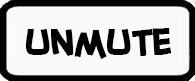
<style>
.page{position:relative;width:195px;height:81px;background:#fafafa}
.page>*{position:absolute;margin:0}
.t1{font:38px "CreativeBlockBBBold";letter-spacing:-0.05em;color:#000000}
</style>
<div class="page">
<p class="t1" style="left:25px;top:28px;width:147px;height:31px">unmutee</p>
</div>
